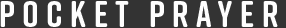
<style>
.page{position:relative;width:286px;height:28px;background:#333333}
.page>*{position:absolute;margin:0}
.t1{font:37px "RiftSoft-Bold";letter-spacing:0.2em;color:#fefefe}
</style>
<div class="page">
<p class="t1" style="left:0px;top:1px;width:278px;height:26px">POCKET PRAYER</p>
</div>
